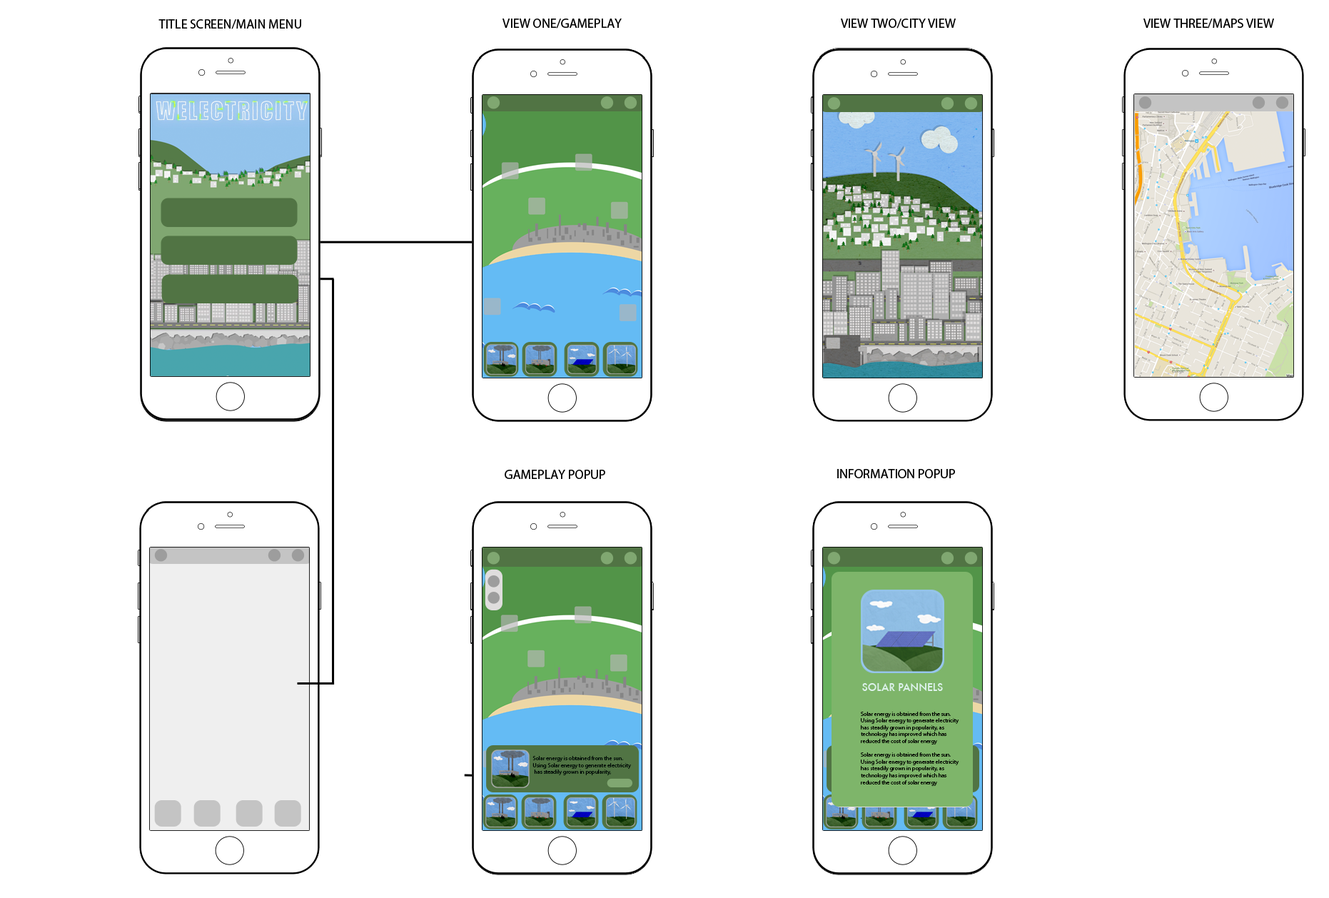
<style>
.page{position:relative;width:1329px;height:898px;background:#ffffff}
.page>*{position:absolute;margin:0}
.t1{font:12.8px "MyriadPro-Regular";color:#000000}
.t2{font:10px "Futura-Medium";color:#ddf2ea}
.t3{font:5.7px "MyriadPro-Regular";color:#000000}
.t4{font:5.7px "MyriadPro-Regular";color:#000906}
</style>
<div class="page">
<p class="t1" style="left:158px;top:19px;width:143px;height:10px">TITLE SCREEN/MAIN MENU</p>
<p class="t1" style="left:502px;top:19px;width:119px;height:10px">VIEW ONE/GAMEPLAY</p>
<p class="t1" style="left:840px;top:19px;width:115px;height:10px">VIEW TWO/CITY VIEW</p>
<p class="t1" style="left:1143px;top:19px;width:131px;height:10px">VIEW THREE/MAPS VIEW</p>
<p class="t1" style="left:504px;top:469px;width:101px;height:10px">GAMEPLAY POPUP</p>
<p class="t1" style="left:837px;top:469px;width:118px;height:9px">INFORMATION POPUP</p>
<p class="t2" style="left:862px;top:683px;width:81px;height:8px">SOLAR PANNELS</p>
<p class="t3" style="left:860px;top:711px;width:99px;height:107px">Solar energy is obtained from the sun. <br>Using Solar energy to generate electricity <br>has steadily grown in popularity, as <br>technology has improved which has <br>reduced the cost of solar energy<br><br>Solar energy is obtained from the sun. <br>Using Solar energy to generate electricity <br>has steadily grown in popularity, as <br>technology has improved which has <br>reduced the cost of solar energy<br><br><br><br><br>.</p>
<p class="t4" style="left:532px;top:756px;width:99px;height:19px">Solar energy is obtained from the sun.<br>Using Solar energy to generate electricity<br> has steadily grown in popularity,</p>
</div>
